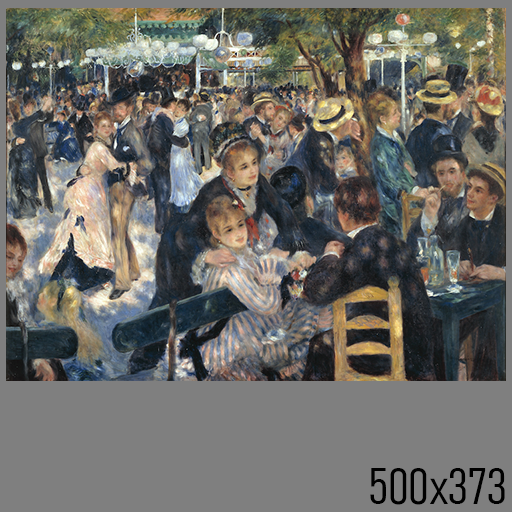
<style>
.page{position:relative;width:512px;height:512px;background:#7f7f7f}
.page>*{position:absolute;margin:0}
.t1{font:50px "Bahnschrift-LightCondensed";color:#000000}
</style>
<div class="page">
<p class="t1" style="left:370px;top:468px;width:135px;height:37px">500x373</p>
</div>
